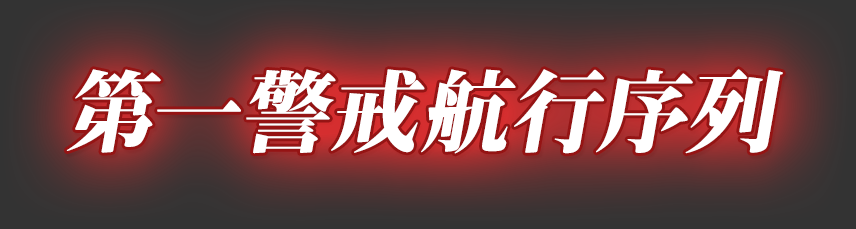
<style>
.page{position:relative;width:856px;height:229px}
.page>*{position:absolute;margin:0}
.t1{font:89px "KochoStd-Heavy";letter-spacing:0.015em;color:#ffffff;font-weight:bold;font-style:italic}
</style>
<div class="page">
<p class="t1" style="left:66px;top:69px;width:717px;height:85px">第一警戒航行序列</p>
</div>
